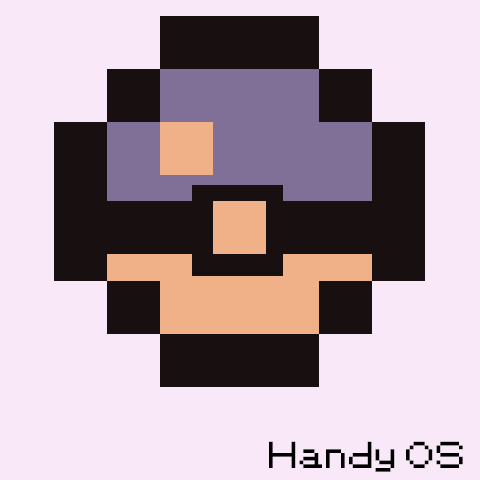
<style>
.page{position:relative;width:480px;height:480px;background:#f8e8f8}
.page>*{position:absolute;margin:0}
.t1{font:30px "PKMN-RBYGSC";color:#000000}
</style>
<div class="page">
<p class="t1" style="left:269px;top:441px;width:194px;height:31px">Handy OS</p>
</div>
